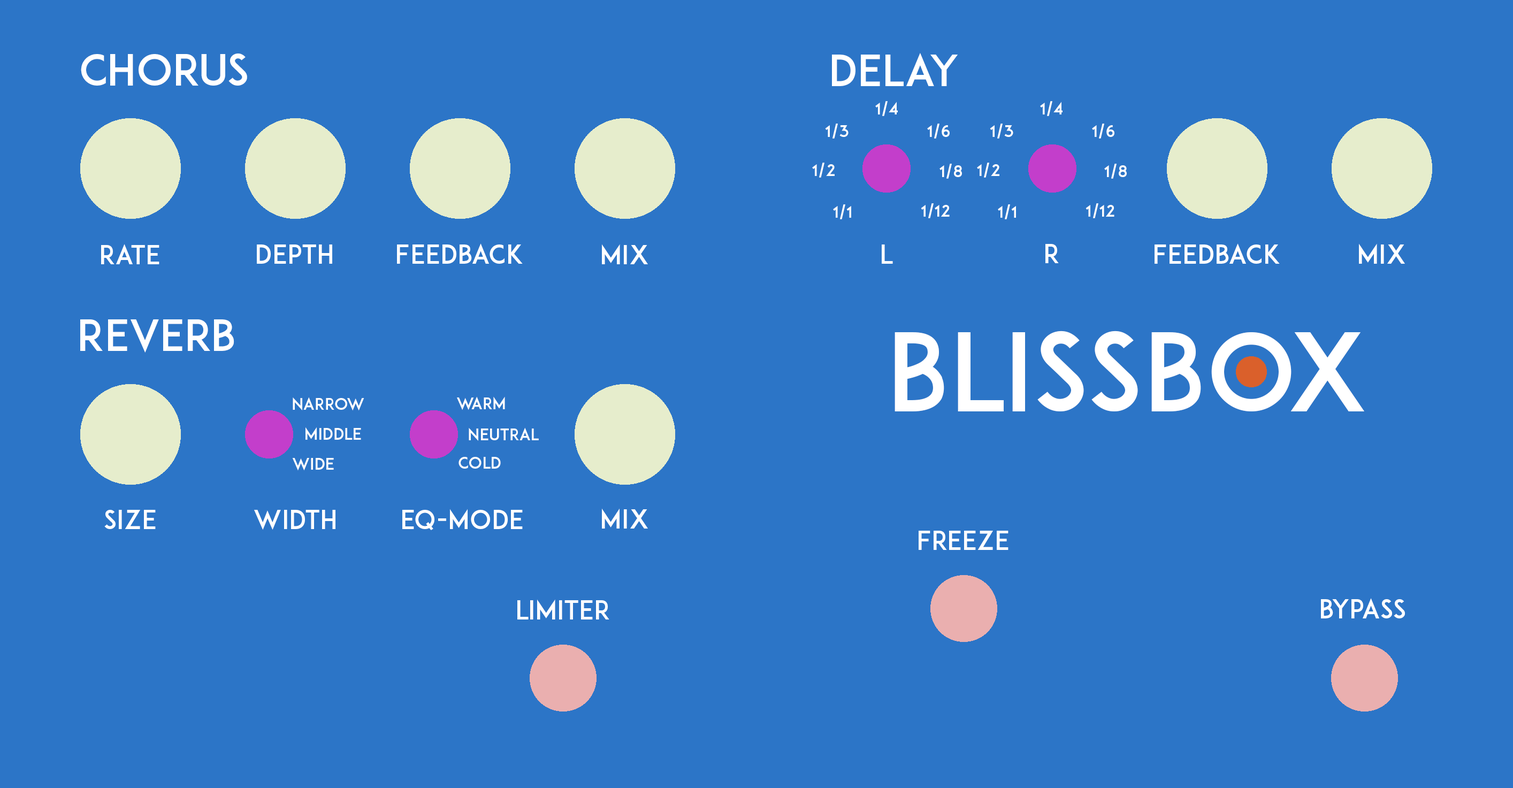
<style>
.page{position:relative;width:1513px;height:788px;background:#2c75c7}
.page>*{position:absolute;margin:0}
.t1{font:42.8px "ADAM.CGPRO";color:#ffffff}
.t2{font:16.1px "ADAM.CGPRO";color:#ffffff}
.t3{font:25.7px "ADAM.CGPRO";color:#ffffff}
.t4{font:107px "ADAM.CGPRO";color:#ffffff}
</style>
<div class="page">
<p class="t1" style="left:81px;top:54px;width:166px;height:32px">CHORUS</p>
<p class="t1" style="left:832px;top:53px;width:126px;height:33px">Delay</p>
<p class="t2" style="left:875px;top:101px;width:23px;height:15px">1/4</p>
<p class="t2" style="left:1040px;top:101px;width:23px;height:15px">1/4</p>
<p class="t2" style="left:825px;top:124px;width:24px;height:15px">1/3</p>
<p class="t2" style="left:927px;top:124px;width:23px;height:15px">1/6</p>
<p class="t2" style="left:990px;top:124px;width:23px;height:15px">1/3</p>
<p class="t2" style="left:1092px;top:124px;width:22px;height:15px">1/6</p>
<p class="t2" style="left:812px;top:163px;width:23px;height:15px">1/2</p>
<p class="t2" style="left:940px;top:164px;width:22px;height:15px">1/8</p>
<p class="t2" style="left:977px;top:163px;width:22px;height:15px">1/2</p>
<p class="t2" style="left:1104px;top:164px;width:23px;height:15px">1/8</p>
<p class="t2" style="left:833px;top:204px;width:18px;height:15px">1/1</p>
<p class="t2" style="left:921px;top:203px;width:29px;height:15px">1/12</p>
<p class="t2" style="left:998px;top:204px;width:18px;height:15px">1/1</p>
<p class="t2" style="left:1086px;top:203px;width:28px;height:15px">1/12</p>
<p class="t3" style="left:101px;top:244px;width:58px;height:20px">Rate</p>
<p class="t3" style="left:257px;top:245px;width:75px;height:19px">Depth</p>
<p class="t3" style="left:397px;top:243px;width:126px;height:21px">FEEDBACK</p>
<p class="t3" style="left:602px;top:244px;width:46px;height:20px">MIX</p>
<p class="t3" style="left:882px;top:245px;width:11px;height:19px">L</p>
<p class="t3" style="left:1045px;top:244px;width:14px;height:19px">R</p>
<p class="t3" style="left:1155px;top:243px;width:125px;height:21px">Feedback</p>
<p class="t3" style="left:1359px;top:243px;width:46px;height:21px">Mix</p>
<p class="t1" style="left:80px;top:319px;width:154px;height:34px">Reverb</p>
<p class="t4" style="left:895px;top:331px;width:469px;height:80px">BlissBox</p>
<p class="t2" style="left:293px;top:397px;width:71px;height:14px">NARROW</p>
<p class="t2" style="left:457px;top:396px;width:48px;height:14px">WARM</p>
<p class="t2" style="left:306px;top:427px;width:55px;height:13px">MIDDLE</p>
<p class="t2" style="left:469px;top:427px;width:70px;height:14px">NEUTRAL</p>
<p class="t2" style="left:292px;top:458px;width:42px;height:13px">WIDE</p>
<p class="t2" style="left:459px;top:457px;width:42px;height:12px">COLD</p>
<p class="t3" style="left:104px;top:510px;width:52px;height:19px">Size</p>
<p class="t3" style="left:254px;top:510px;width:81px;height:20px">Width</p>
<p class="t3" style="left:402px;top:509px;width:121px;height:21px">EQ-Mode</p>
<p class="t3" style="left:602px;top:508px;width:46px;height:21px">Mix</p>
<p class="t3" style="left:919px;top:531px;width:90px;height:19px">FREEZE</p>
<p class="t3" style="left:517px;top:599px;width:92px;height:21px">LIMITER</p>
<p class="t3" style="left:1321px;top:598px;width:84px;height:20px">BYPASS</p>
</div>
